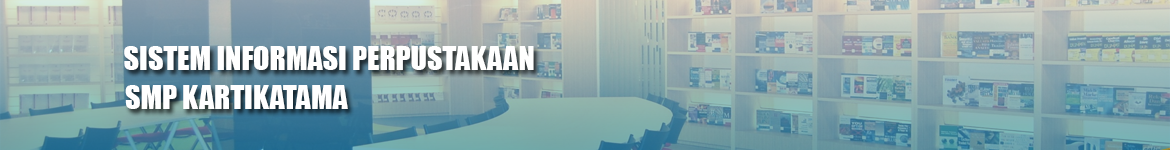
<style>
.page{position:relative;width:1170px;height:150px}
.page>*{position:absolute;margin:0}
.t1{font:30px "Impact";color:#ffffff}
</style>
<div class="page">
<p class="t1" style="left:124px;top:46px;width:410px;height:24px">SISTEM INFORMASI PERPUSTAKAAN</p>
<p class="t1" style="left:125px;top:85px;width:223px;height:24px">SMP KARTIKATAMA</p>
</div>
